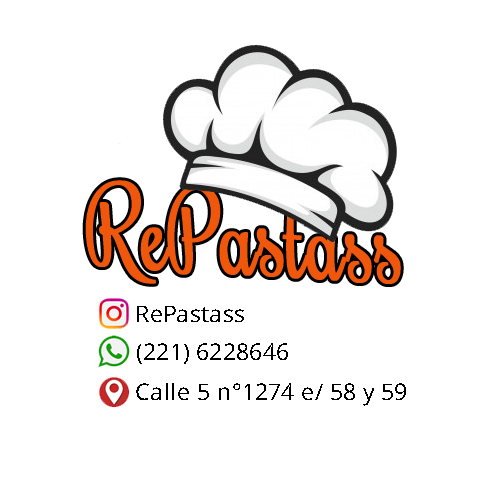
<style>
.page{position:relative;width:482px;height:482px;background:#ffffff}
.page>*{position:absolute;margin:0}
.t1{font:105.9px "Rochester-Regular";color:#ee570c;font-weight:bold;scale:0.78 1}
.t2{font:22.7px "OpenSans";color:#000000}
.t3{font:29.2px "OpenSans";color:#000000}
</style>
<div class="page">
<p class="t1" style="left:85px;top:180px;width:316px;height:104px;rotate:3deg">RePastass</p>
<p class="t2" style="left:137px;top:306px;width:107px;height:16px"><span class="t3"> </span>RePastass</p>
<p class="t2" style="left:137px;top:343px;width:151px;height:21px">(221) 6228646</p>
<p class="t2" style="left:136px;top:383px;width:270px;height:23px">Calle 5 n°1274 e/ 58 y 59</p>
</div>
